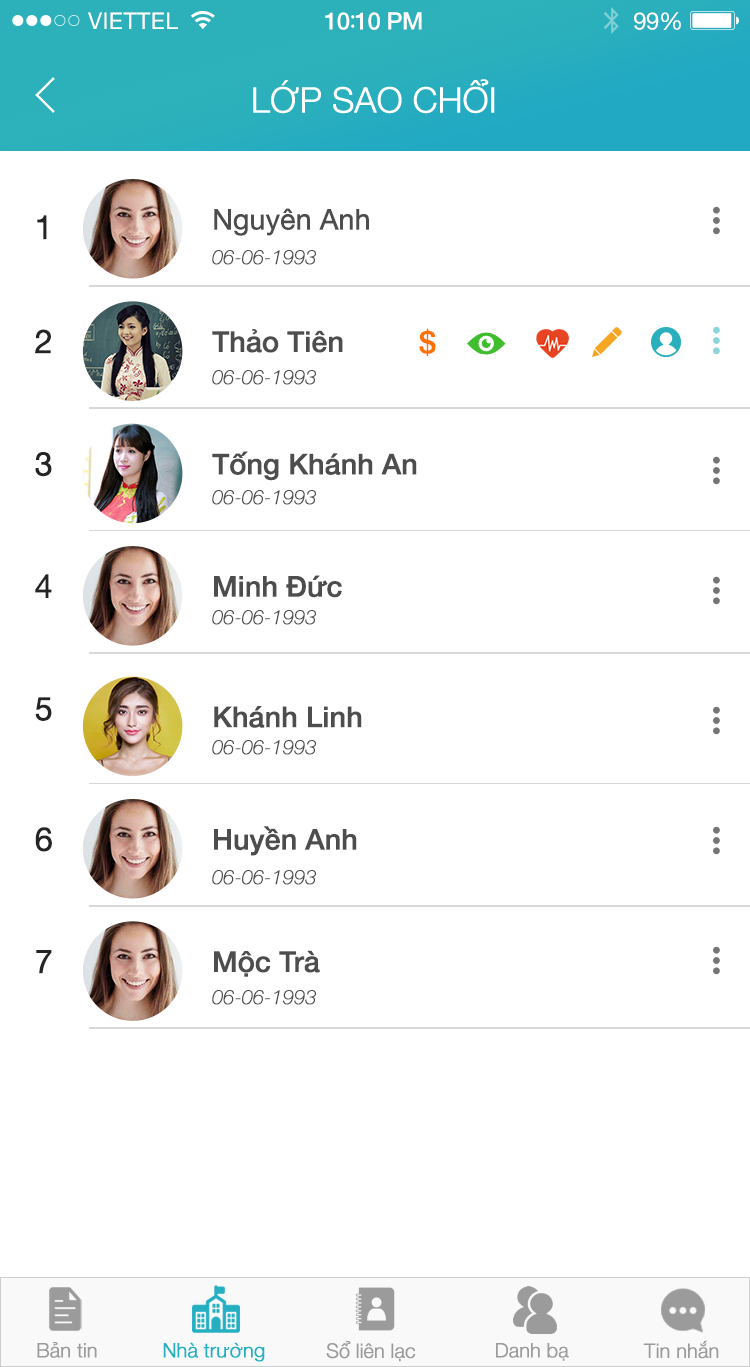
<style>
.page{position:relative;width:750px;height:1367px;background:#ffffff}
.page>*{position:absolute;margin:0}
.t1{font:23px "HelveticaNeue";letter-spacing:0.02em;color:#ffffff}
.t2{font:24px "HelveticaNeue-Medium";letter-spacing:-0.02em;color:#ffffff}
.t3{font:26px "MyriadPro-Regular";letter-spacing:-0.02em;color:#ffffff}
.t4{font:24px "HelveticaNeue";letter-spacing:-0.02em;color:#ffffff}
.t5{font:35px "HelveticaNeue-Light";letter-spacing:-0.02em;color:#ffffff;font-weight:bold}
.t6{font:28.6px "HelveticaNeue";letter-spacing:-0.02em;color:#4d4d4d;font-weight:bold}
.t7{font:32.6px "HelveticaNeue";letter-spacing:-0.02em;color:#242424;font-weight:bold}
.t8{font:20px "HelveticaNeue-ThinItalic";letter-spacing:-0.02em;color:#4d4d4d;font-weight:bold}
.t9{font:28.6px "HelveticaNeue-Medium";letter-spacing:-0.02em;color:#4d4d4d;font-weight:bold}
.t10{font:30px "HelveticaNeue-Medium";letter-spacing:-0.02em;color:#ff7200;font-weight:bold}
.t11{font:20px "HelveticaNeue-Light";letter-spacing:-0.02em;color:#9b9b9b;font-weight:bold}
.t12{font:20px "HelveticaNeue-Light";letter-spacing:-0.02em;color:#26afc2;font-weight:bold}
</style>
<div class="page">
<p class="t1" style="left:88px;top:12px;width:90px;height:17px">VIETTEL</p>
<p class="t2" style="left:325px;top:12px;width:97px;height:18px">10<span class="t3">:</span>10 PM</p>
<p class="t4" style="left:634px;top:12px;width:47px;height:18px">99%</p>
<p class="t5" style="left:253px;top:79px;width:242px;height:35px">LỚP SAO CHỔI</p>
<p class="t6" style="left:214px;top:208px;width:155px;height:28px">Nguyên Anh</p>
<p class="t7" style="left:37px;top:215px;width:10px;height:25px">1</p>
<p class="t8" style="left:212px;top:250px;width:104px;height:15px">06-06-1993</p>
<p class="t7" style="left:35px;top:329px;width:16px;height:25px">2</p>
<p class="t9" style="left:212px;top:329px;width:131px;height:24px">Thảo Tiên</p>
<p class="t10" style="left:419px;top:328px;width:17px;height:28px">$</p>
<p class="t8" style="left:212px;top:370px;width:104px;height:15px">06-06-1993</p>
<p class="t7" style="left:35px;top:452px;width:17px;height:25px">3</p>
<p class="t9" style="left:212px;top:451px;width:205px;height:30px">Tống Khánh An</p>
<p class="t8" style="left:212px;top:490px;width:104px;height:15px">06-06-1993</p>
<p class="t7" style="left:35px;top:574px;width:17px;height:24px">4</p>
<p class="t9" style="left:214px;top:575px;width:128px;height:23px">Minh Đức</p>
<p class="t8" style="left:212px;top:610px;width:104px;height:15px">06-06-1993</p>
<p class="t7" style="left:35px;top:697px;width:17px;height:24px">5</p>
<p class="t9" style="left:214px;top:706px;width:148px;height:22px">Khánh Linh</p>
<p class="t8" style="left:212px;top:740px;width:104px;height:15px">06-06-1993</p>
<p class="t7" style="left:35px;top:827px;width:17px;height:25px">6</p>
<p class="t9" style="left:214px;top:826px;width:143px;height:30px">Huyền Anh</p>
<p class="t8" style="left:212px;top:870px;width:104px;height:15px">06-06-1993</p>
<p class="t7" style="left:36px;top:950px;width:16px;height:24px">7</p>
<p class="t9" style="left:214px;top:950px;width:106px;height:27px">Mộc Trà</p>
<p class="t8" style="left:212px;top:990px;width:104px;height:15px">06-06-1993</p>
<p class="t11" style="left:37px;top:1342px;width:60px;height:16px">Bản tin</p>
<p class="t12" style="left:163px;top:1342px;width:102px;height:20px">Nhà trường</p>
<p class="t11" style="left:326px;top:1341px;width:90px;height:21px">Sổ liên lạc</p>
<p class="t11" style="left:496px;top:1343px;width:73px;height:18px">Danh bạ</p>
<p class="t11" style="left:643px;top:1340px;width:76px;height:19px">Tin nhắn</p>
</div>
